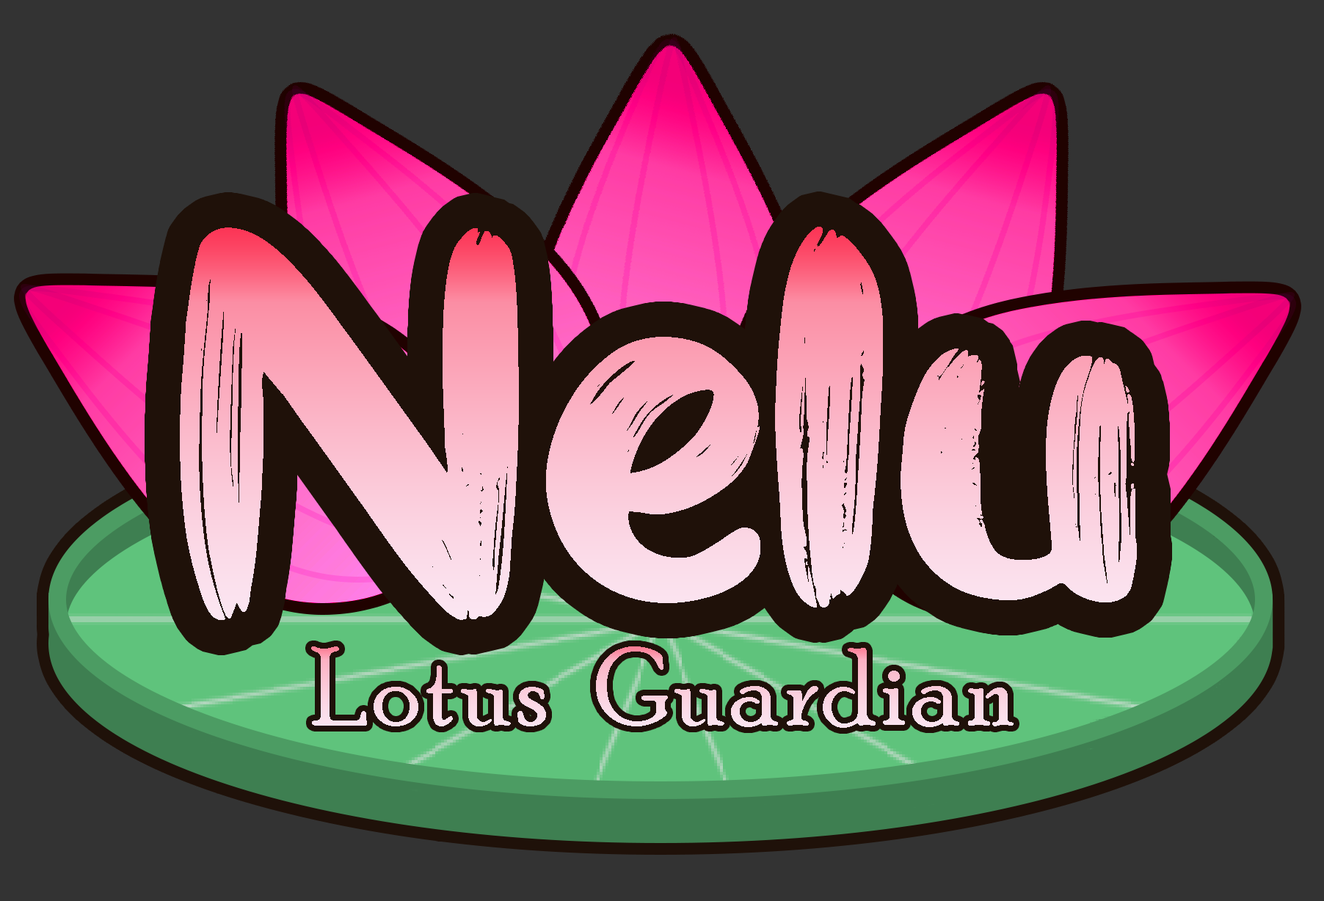
<style>
.page{position:relative;width:1324px;height:901px;background:#333333}
.page>*{position:absolute;margin:0}
.t1{font:506px "GhiyaStrokes"}
.t2{font:110.1px "PoorRichard-Regular";letter-spacing:0.03em;color:#fbe2ee}
</style>
<div class="page">
<p class="t1" style="left:180px;top:227px;width:956px;height:393px">Nelu</p>
<p class="t2" style="left:311px;top:646px;width:702px;height:82px">Lotus  Guardian</p>
</div>
